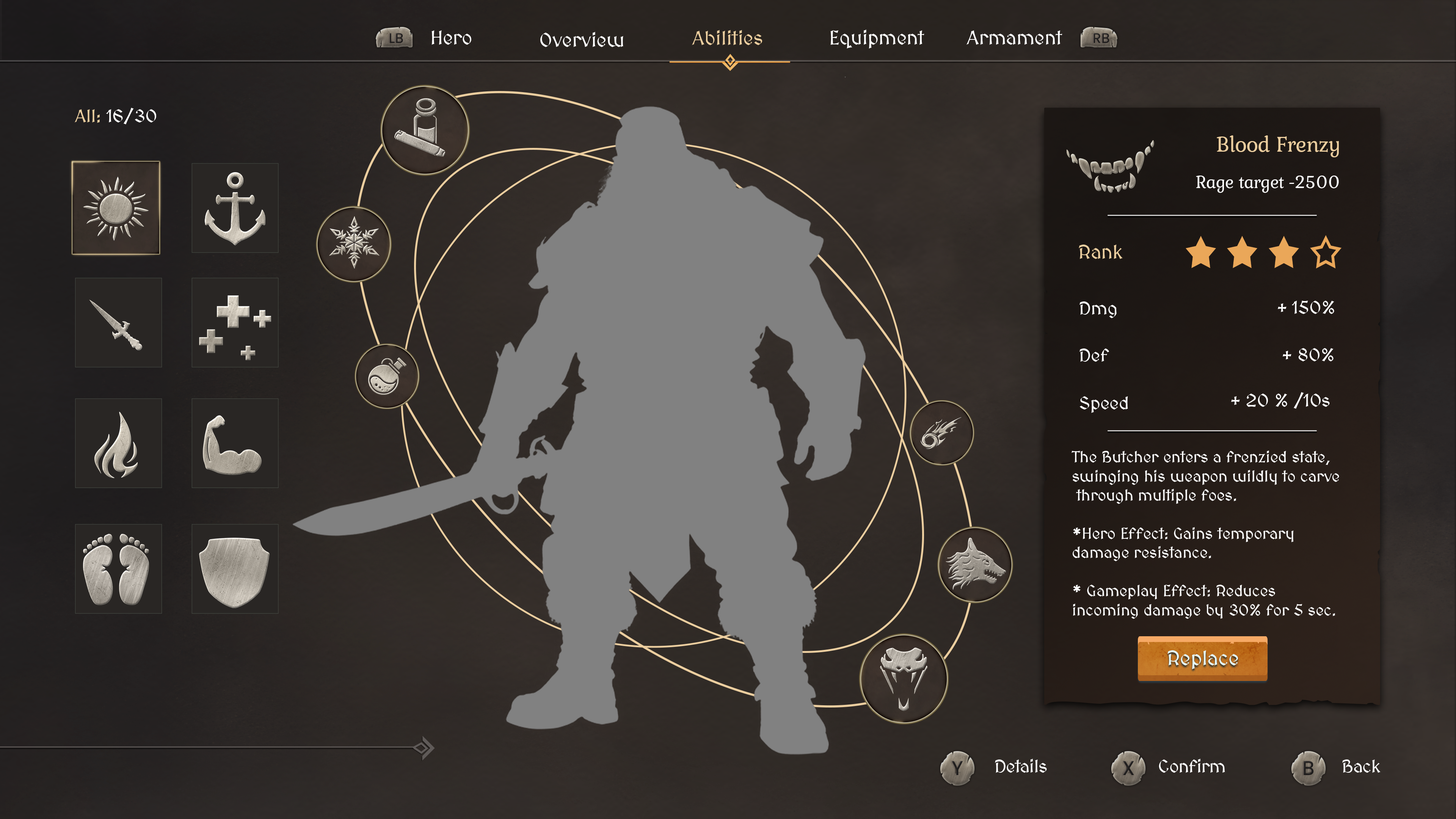
<style>
.page{position:relative;width:1456px;height:819px}
.page>*{position:absolute;margin:0}
.t1{font:19.8px "MedievalSharp";color:#ecce9f}
.t2{font:19.8px "MedievalSharp";color:#ffffff}
.t3{font:18.2px "MedievalSharp";color:#ffffff}
.t4{font:18.2px "MedievalSharp";color:#ecce9f}
.t5{font:22.7px "Kurale-Regular";letter-spacing:-0.02em;color:#ebcd9e}
.t6{font:18.2px "Kurale-Regular";letter-spacing:-0.02em;color:#ffffff}
.t7{font:19.7px "MedievalSharp";color:#ecce9f}
.t8{font:15.9px "MedievalSharp";color:#ffffff}
.t9{font:20.5px "MedievalSharp";color:#e5fbfd}
.t10{font:18.2px "MedievalSharp";letter-spacing:-0.02em;color:#ffffff}
</style>
<div class="page">
<p class="t1" style="left:692px;top:30px;width:70px;height:15px">Abilities</p>
<p class="t2" style="left:830px;top:30px;width:94px;height:19px">Equipment</p>
<p class="t2" style="left:431px;top:30px;width:40px;height:15px">Hero</p>
<p class="t2" style="left:540px;top:32px;width:83px;height:15px">Overview</p>
<p class="t2" style="left:966px;top:30px;width:96px;height:15px">Armament</p>
<p class="t3" style="left:75px;top:108px;width:81px;height:16px"><span class="t4">All:</span> 16/30</p>
<p class="t5" style="left:1217px;top:135px;width:122px;height:22px">Blood Frenzy</p>
<p class="t6" style="left:1196px;top:176px;width:143px;height:17px">Rage target -2500</p>
<p class="t7" style="left:1079px;top:245px;width:44px;height:14px">Rank</p>
<p class="t3" style="left:1079px;top:301px;width:38px;height:17px">Dmg</p>
<p class="t3" style="left:1277px;top:301px;width:57px;height:13px">+ 150%</p>
<p class="t3" style="left:1079px;top:348px;width:30px;height:14px">Def</p>
<p class="t3" style="left:1282px;top:348px;width:52px;height:13px">+ 80%</p>
<p class="t3" style="left:1079px;top:396px;width:49px;height:17px">Speed</p>
<p class="t3" style="left:1231px;top:392px;width:99px;height:17px">+ 20 % /10s</p>
<p class="t8" style="left:1072px;top:450px;width:267px;height:169px">The Butcher enters a frenzied state, <br>swinging his weapon wildly to carve<br> through multiple foes.<br><br>*Hero Effect: Gains temporary <br>damage resistance.<br><br>* Gameplay Effect: Reduces <br>incoming damage by 30% for 5 sec.</p>
<p class="t9" style="left:1167px;top:650px;width:71px;height:19px">Replace</p>
<p class="t10" style="left:995px;top:759px;width:52px;height:14px">Details</p>
<p class="t10" style="left:1159px;top:759px;width:66px;height:14px">Confirm</p>
<p class="t10" style="left:1342px;top:759px;width:39px;height:14px">Back</p>
</div>
